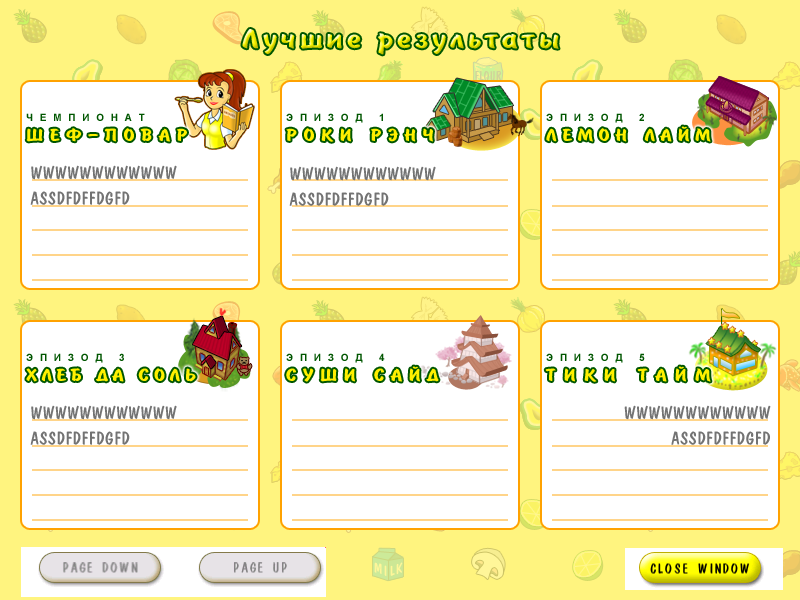
<style>
.page{position:relative;width:800px;height:600px;background:#ffffff}
.page>*{position:absolute;margin:0}
.t1{font:30px "BrushType-Bold";letter-spacing:0.1em;scale:1.32 1}
.t2{font:10px "Arial-BoldMT";letter-spacing:0.2em;color:#005600;text-transform:uppercase}
.t3{font:19.2px "BrushType-Bold";letter-spacing:0.22em;color:#fff000;text-transform:uppercase;scale:1.32 1}
.t4{font:19.2px "BrushType-Bold";letter-spacing:0.26em;color:#fff000;text-transform:uppercase;scale:1.32 1}
.t5{font:18px/25px "DomCasualBT-Regular";letter-spacing:0.025em;color:#737373}
.t6{font:19.2px "BrushType-Bold";letter-spacing:0.25em;color:#fff000;text-transform:uppercase;scale:1.32 1}
.t7{font:19.2px "BrushType-Bold";letter-spacing:0.32em;color:#fff000;text-transform:uppercase;scale:1.32 1}
.t8{font:19.2px "BrushType-Bold";letter-spacing:0.18em;color:#fff000;text-transform:uppercase;scale:1.32 1}
</style>
<div class="page">
<p class="t1" style="left:242px;top:29px;width:317px;height:26px">Ëó÷øèå ðåçóëüòàòû</p>
<p class="t2" style="left:26px;top:113px;width:119px;height:8px">Ч е м п и о н а т</p>
<p class="t2" style="left:286px;top:113px;width:97px;height:10px">э п и з о д   1</p>
<p class="t2" style="left:546px;top:113px;width:98px;height:10px">э п и з о д   2</p>
<p class="t3" style="left:546px;top:126px;width:165px;height:16px">Ëåìîí Ëàéì</p>
<p class="t4" style="left:26px;top:128px;width:161px;height:14px">Øåô-ïîâàð</p>
<p class="t4" style="left:286px;top:128px;width:147px;height:14px">Ðîêè Ðýí×</p>
<p class="t5" style="left:30px;top:165px;width:147px;height:40px">WWWWWWWWWWWW<br>ASSDFDFFDGFD</p>
<p class="t5" style="left:289px;top:166px;width:147px;height:40px">WWWWWWWWWWWW<br>ASSDFDFFDGFD</p>
<p class="t2" style="left:26px;top:353px;width:98px;height:10px">э п и з о д   3</p>
<p class="t2" style="left:286px;top:353px;width:99px;height:10px">э п и з о д   4</p>
<p class="t2" style="left:546px;top:353px;width:99px;height:10px">Э П И З О Д   5</p>
<p class="t6" style="left:286px;top:366px;width:153px;height:16px">Ñóøè Ñàéä</p>
<p class="t7" style="left:545px;top:366px;width:166px;height:16px">Òèêè Òàéì</p>
<p class="t8" style="left:26px;top:368px;width:170px;height:14px">Õëåá äà Ñîëü</p>
<p class="t5" style="left:30px;top:405px;width:147px;height:40px">WWWWWWWWWWWW<br>ASSDFDFFDGFD</p>
<p class="t5" style="left:624px;top:405px;width:147px;height:40px;text-align:right">WWWWWWWWWWWW<br>ASSDFDFFDGFD</p>
</div>
